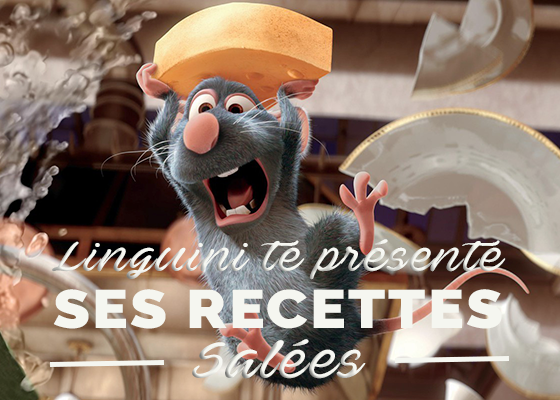
<style>
.page{position:relative;width:560px;height:400px}
.page>*{position:absolute;margin:0}
.t1{font:41.4px "AveBetwanPERSONALUSEONLY";letter-spacing:0.04em;color:#f5f6f0;scale:1.11 1}
.t2{font:54px "Raleway-Black";letter-spacing:0.04em;color:#f5f6f0;scale:1.11 1}
.t3{font:50.4px "AveBetwanPERSONALUSEONLY";letter-spacing:0.04em;color:#f5f6f0;scale:1.11 1}
</style>
<div class="page">
<p class="t1" style="left:52px;top:239px;width:454px;height:41px">Linguini te présente</p>
<p class="t2" style="left:53px;top:289px;width:449px;height:40px">SES RECETTES</p>
<p class="t3" style="left:192px;top:339px;width:174px;height:40px">Salées</p>
</div>
